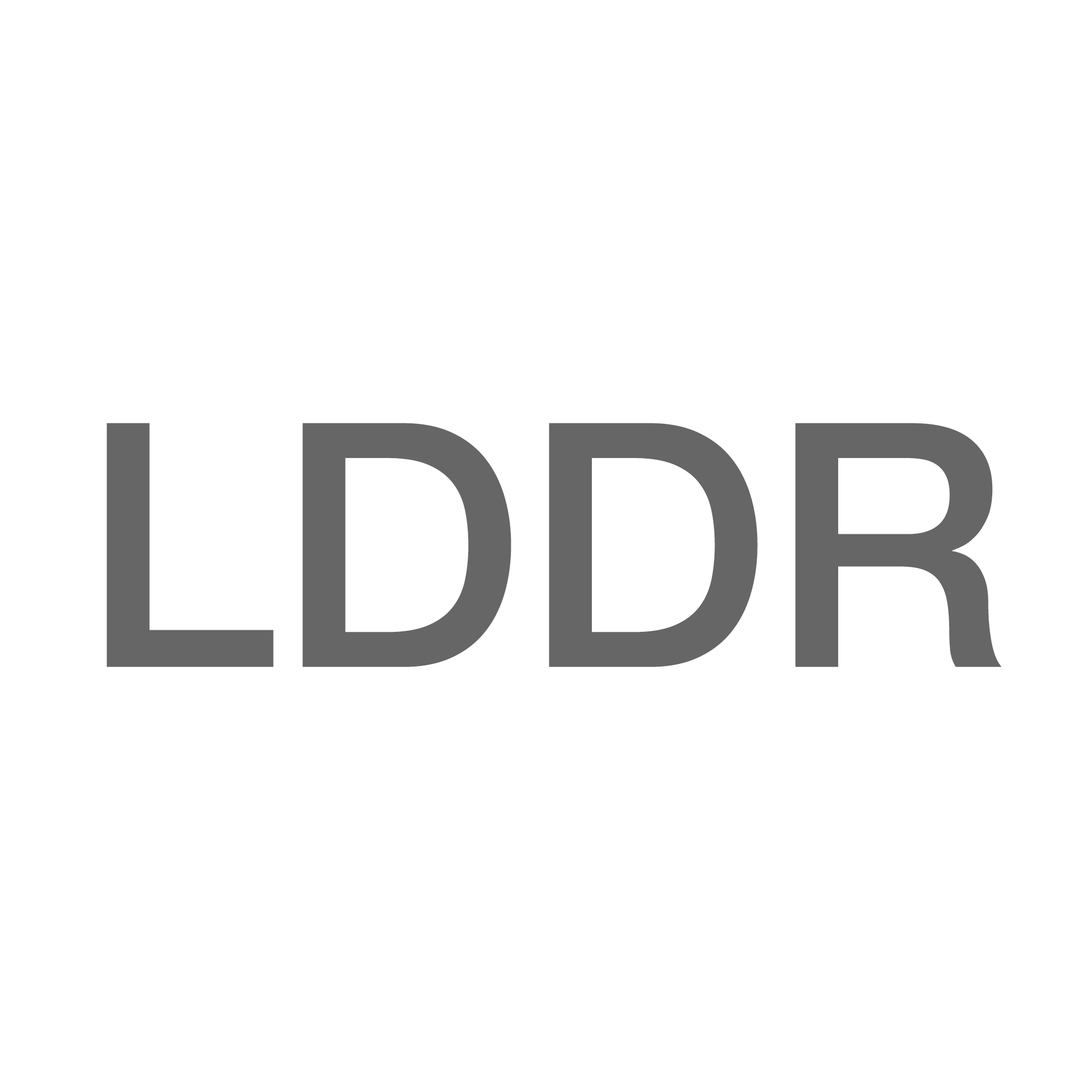
<style>
.page{position:relative;width:1092px;height:1092px;background:#ffffff}
.page>*{position:absolute;margin:0}
.t1{font:341.2px "HelveticaNeue-Medium";color:#666666}
</style>
<div class="page">
<p class="t1" style="left:107px;top:423px;width:895px;height:244px">LDDR</p>
</div>
